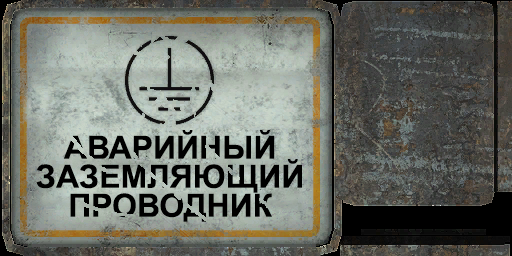
<style>
.page{position:relative;width:512px;height:256px}
.page>*{position:absolute;margin:0}
.t1{font:32px/29px "Arial-BoldMT";color:#000000}
</style>
<div class="page">
<p class="t1" style="left:36px;top:130px;width:266px;height:92px;text-align:center">АВАРИЙНЫЙ<br>ЗАЗЕМЛЯЮЩИЙ<br>ПРОВОДНИК</p>
</div>
